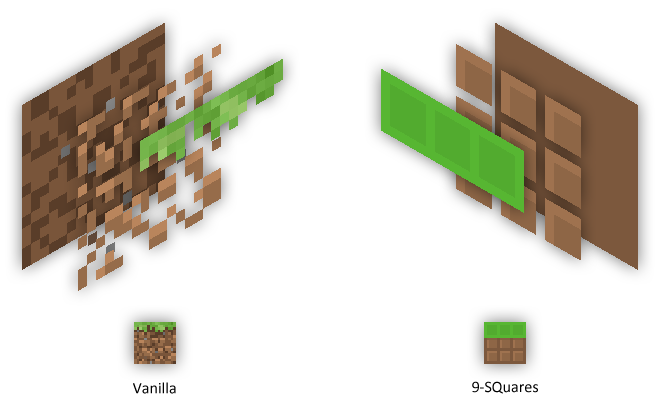
<style>
.page{position:relative;width:660px;height:415px;background:#ffffff}
.page>*{position:absolute;margin:0}
.t1{font:16px "Calibri";color:#000000}
</style>
<div class="page">
<p class="t1" style="left:133px;top:382px;width:43px;height:12px">Vanilla</p>
<p class="t1" style="left:472px;top:381px;width:66px;height:13px">9-SQuares</p>
</div>
